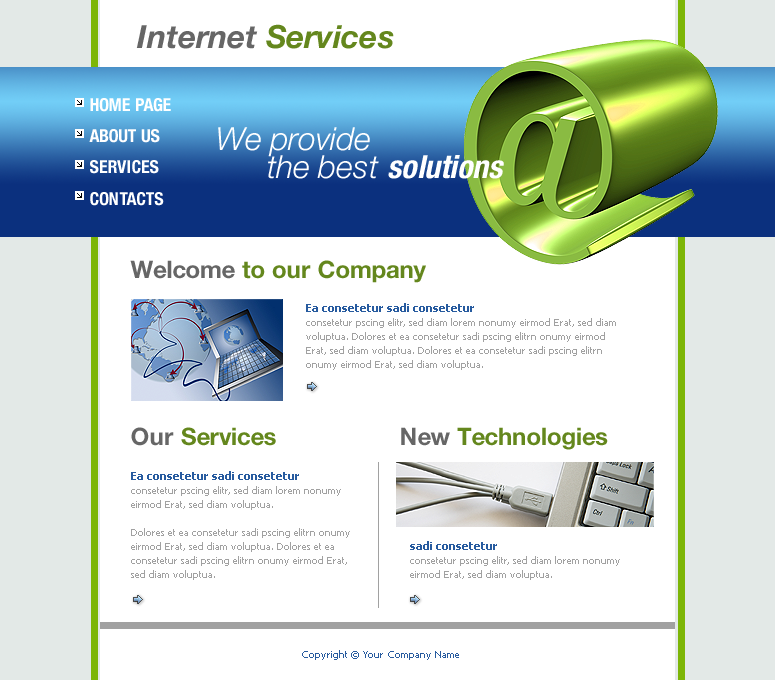
<style>
.page{position:relative;width:775px;height:680px;background:#ffffff}
.page>*{position:absolute;margin:0}
.t1{font:32px "HelveticaNeueLTPro-BdIt";color:#666666}
.t2{font:32px "HelveticaNeueLTPro-BdIt";color:#64871d}
.t3{font:18px "HelveticaNeueLTPro-BdCn";color:#ffffff}
.t4{font:32px/28.2px "HelveticaNeueLTPro-LtIt";color:#ffffff}
.t5{font:32px/28.2px "HelveticaNeueLTPro-BdCnO";color:#ffffff}
.t6{font:24px "HelveticaNeueLTPro-Bd";color:#64871d}
.t7{font:24px "HelveticaNeueLTPro-Bd";color:#666666}
.t8{font:10px/14px "Tahoma";color:#a1a1a1}
.t9{font:11px/14px "Tahoma-Bold";color:#275b9f}
.t10{font:10px "Tahoma";color:#275b9f}
</style>
<div class="page">
<p class="t1" style="left:136px;top:24px;width:258px;height:25px">Internet <span class="t2">Services</span></p>
<p class="t3" style="left:90px;top:98px;width:81px;height:14px">HOME PAGE</p>
<p class="t3" style="left:89px;top:129px;width:71px;height:14px">ABOUT US</p>
<p class="t4" style="left:218px;top:127px;width:286px;height:52px">We provide<br>      the best <span class="t5">solutions</span></p>
<p class="t3" style="left:90px;top:160px;width:69px;height:14px">SERVICES</p>
<p class="t3" style="left:90px;top:192px;width:74px;height:14px">CONTACTS</p>
<p class="t6" style="left:130px;top:260px;width:296px;height:23px"><span class="t7">Welcome </span>to our Company</p>
<p class="t8" style="left:306px;top:303px;width:310px;height:67px"><span class="t9">Ea consetetur sadi consetetur <br></span>consetetur pscing elitr, sed diam lorem nonumy eirmod Erat, sed diam voluptua. Dolores et ea consetetur sadi pscing elitrn onumy eirmod Erat, sed diam voluptua. Dolores et ea consetetur sadi pscing elitrn onumy eirmod Erat, sed diam voluptua.</p>
<p class="t6" style="left:131px;top:427px;width:145px;height:19px"><span class="t7">Our </span>Services</p>
<p class="t6" style="left:401px;top:427px;width:207px;height:23px"><span class="t7">New </span>Technologies</p>
<p class="t8" style="left:131px;top:471px;width:219px;height:109px"><span class="t9">Ea consetetur sadi consetetur <br></span>consetetur pscing elitr, sed diam lorem nonumy eirmod Erat, sed diam voluptua. <br><br>Dolores et ea consetetur sadi pscing elitrn onumy eirmod Erat, sed diam voluptua. Dolores et ea consetetur sadi pscing elitrn onumy eirmod Erat, sed diam voluptua.</p>
<p class="t8" style="left:410px;top:541px;width:210px;height:39px"><span class="t9">sadi consetetur <br></span>consetetur pscing elitr, sed diam lorem nonumy eirmod Erat, sed diam voluptua.</p>
<p class="t10" style="left:302px;top:650px;width:157px;height:10px">Copyright © Your Company Name</p>
</div>
